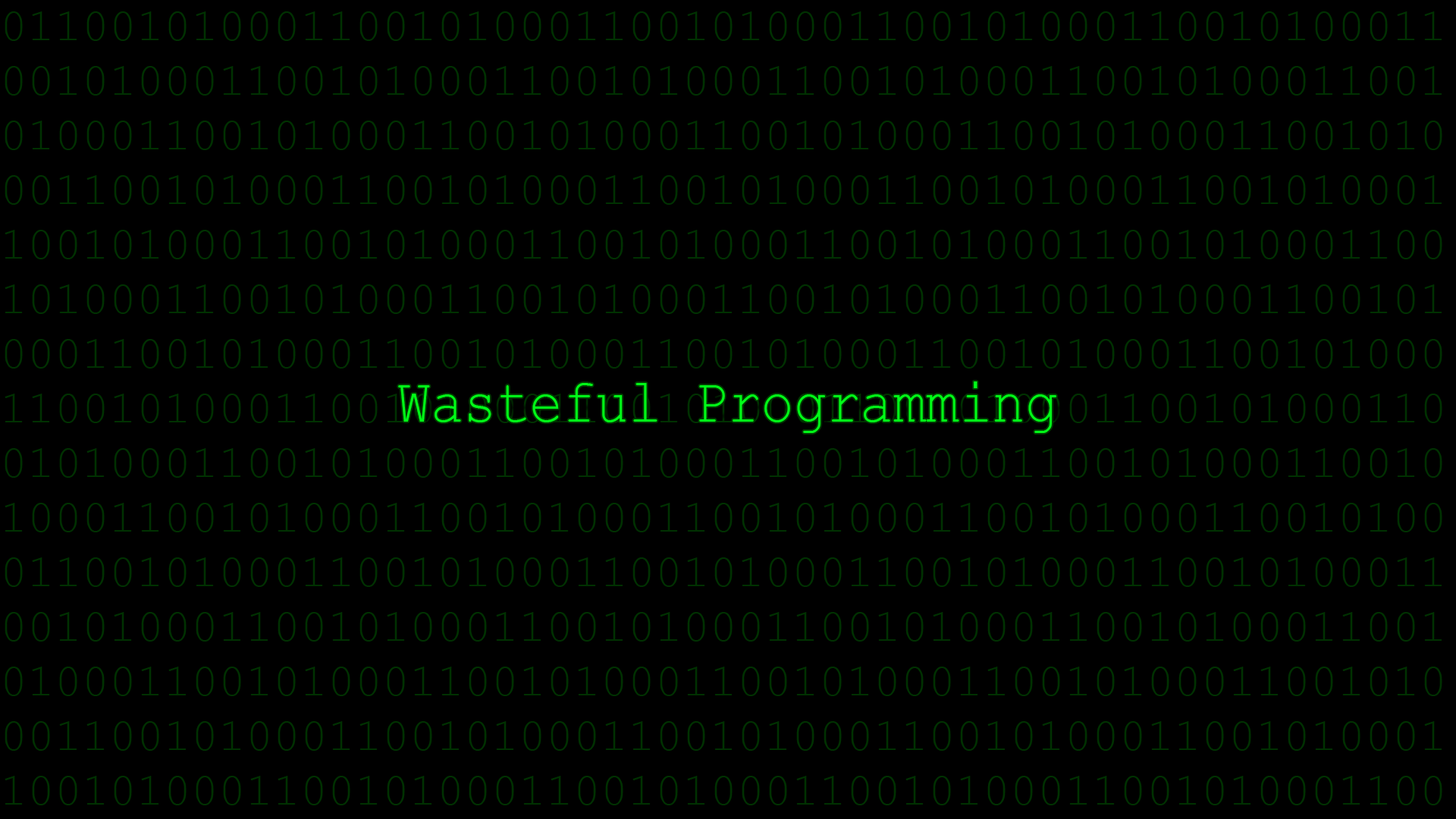
<style>
.page{position:relative;width:1456px;height:819px;background:#000000}
.page>*{position:absolute;margin:0}
.t1{font:45.5px "CourierNewPSMT";color:#003101}
.t2{font:62.1px "CourierNewPSMT";color:#00ff18;scale:0.89 1}
</style>
<div class="page">
<p class="t1" style="left:5px;top:11px;width:1437px;height:794px">01100101000110010100011001010001100101000110010100011001010001100101000110010100011001010001100101000110010100011001010001100101000110010100011001010001100101000110010100011001010001100101000110010100011001010001100101000110010100011001010001100101000110010100011001010001100101000110010100011001010001100101000110010100011001010001100101000110010100011001010001100101000110010100011001010001100101000110010100011001010001100101000110010100011001010001100101000110010100011001010001100101000110010100011001010001100101000110010100011001010001100101000110010100011001010001100101000110010100011001010001100101000110010100011001010001100101000110010100011001010001100101000110010100011001010001100101000110010100011001010001100101000110010100011001010001100101000110010100011001010001100101000110010100</p>
<p class="t2" style="left:398px;top:381px;width:658px;height:52px">Wasteful Programming</p>
</div>
